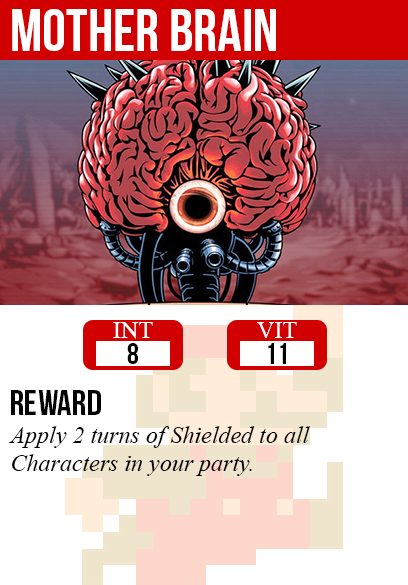
<style>
.page{position:relative;width:408px;height:585px;background:#ffffff}
.page>*{position:absolute;margin:0}
.t1{font:60px "BebasNeue";color:#ffffff}
.t2{font:24px "TimesNewRomanPSMT";color:#ffffff}
.t3{font:30px "BebasNeue";color:#000000}
.t4{font:36px "BebasNeue";color:#000000}
.t5{font:24px "TimesNewRomanPS-ItalicMT";color:#000000}
</style>
<div class="page">
<p class="t1" style="left:12px;top:9px;width:264px;height:42px">mother brain</p>
<p class="t2" style="left:113px;top:322px;width:40px;height:17px">INT</p>
<p class="t2" style="left:257px;top:322px;width:40px;height:16px">VIT</p>
<p class="t3" style="left:127px;top:343px;width:11px;height:21px">8</p>
<p class="t3" style="left:268px;top:343px;width:18px;height:21px">11</p>
<p class="t4" style="left:11px;top:390px;width:90px;height:25px">reward</p>
<p class="t5" style="left:9px;top:426px;width:301px;height:50px">Apply 2 turns of Shielded to all<br>Characters in your party.</p>
</div>
